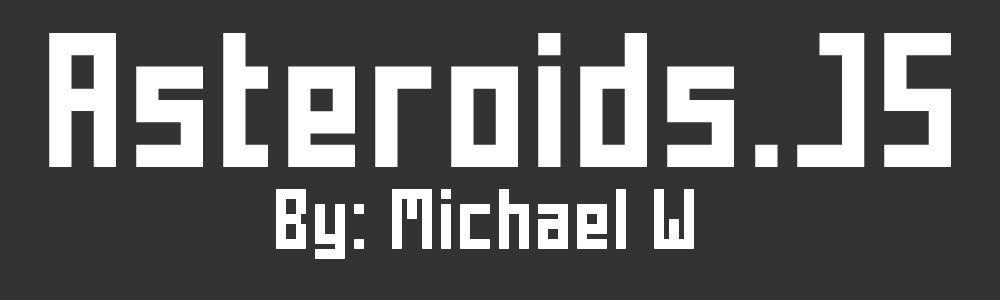
<style>
.page{position:relative;width:1000px;height:300px;background:#333333}
.page>*{position:absolute;margin:0}
.t1{font:178.6px "Mecha-Bold";letter-spacing:0.05em;color:#ffffff}
.t2{font:80px "Mecha-Bold";letter-spacing:0.05em;color:#ffffff}
</style>
<div class="page">
<p class="t1" style="left:49px;top:33px;width:902px;height:134px">Asteroids.JS</p>
<p class="t2" style="left:276px;top:189px;width:418px;height:70px">By: Michael W</p>
</div>
